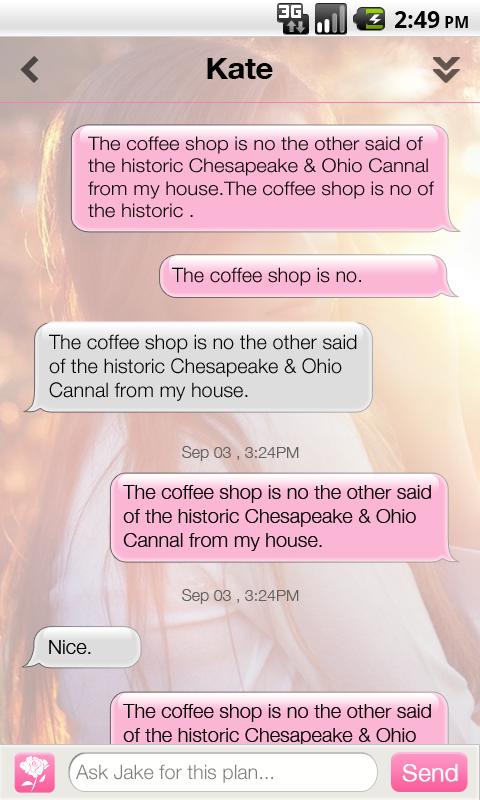
<style>
.page{position:relative;width:480px;height:800px}
.page>*{position:absolute;margin:0}
.t1{font:30px "HelveticaNeue-Bold";color:#000000}
.t2{font:18.8px "HelveticaNeue-Light";color:#040404;scale:1.08 1}
.t3{font:20px "HelveticaNeue-Light";color:#040404}
.t4{font:16px "HelveticaNeue-Light";color:#626262}
.t5{font:20px "HelveticaNeue-Light";color:#7f7f7e}
.t6{font:24px "HelveticaNeue-Light";color:#ffffff;font-weight:bold}
</style>
<div class="page">
<p class="t1" style="left:207px;top:58px;width:66px;height:21px">Kate</p>
<p class="t2" style="left:88px;top:136px;width:346px;height:82px">The coffee shop is no the other said of the historic Chesapeake &amp; Ohio Cannal from my house.The coffee shop is no of the historic .</p>
<p class="t3" style="left:172px;top:267px;width:189px;height:19px">The coffee shop is no.</p>
<p class="t3" style="left:49px;top:334px;width:308px;height:67px">The coffee shop is no the other said of the historic Chesapeake &amp; Ohio Cannal from my house.</p>
<p class="t4" style="left:182px;top:446px;width:117px;height:15px">Sep 03 , 3:24PM</p>
<p class="t3" style="left:123px;top:485px;width:308px;height:66px">The coffee shop is no the other said of the historic Chesapeake &amp; Ohio Cannal from my house.</p>
<p class="t4" style="left:182px;top:589px;width:117px;height:15px">Sep 03 , 3:24PM</p>
<p class="t3" style="left:49px;top:640px;width:42px;height:14px">Nice.</p>
<p class="t3" style="left:123px;top:704px;width:308px;height:66px">The coffee shop is no the other said of the historic Chesapeake &amp; Ohio Cannal from my house.</p>
<p class="t5" style="left:76px;top:764px;width:197px;height:19px">Ask Jake for this plan...</p>
<p class="t6" style="left:402px;top:764px;width:56px;height:18px">Send</p>
</div>
